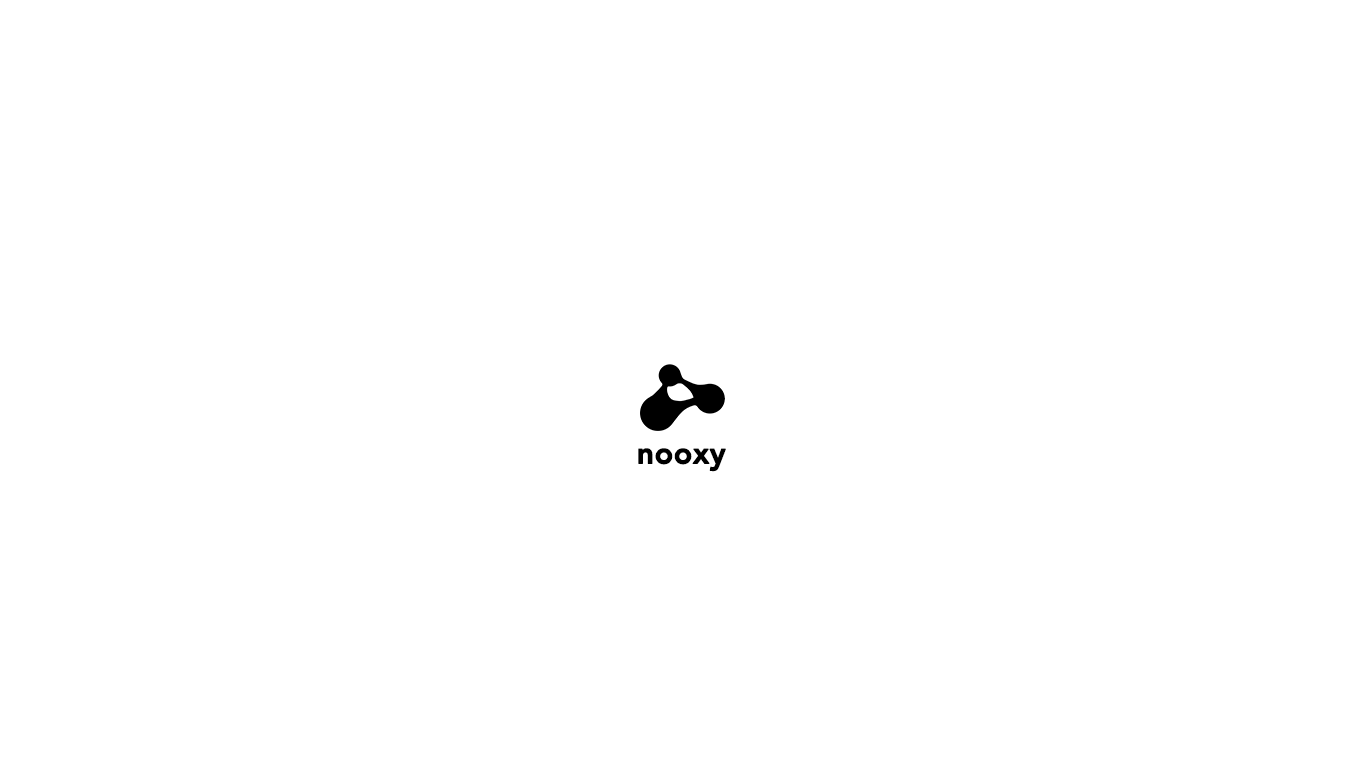
<style>
.page{position:relative;width:1366px;height:768px;background:#ffffff}
.page>*{position:absolute;margin:0}
.t1{font:30px "Avenir-Heavy";color:#000000;font-weight:bold}
</style>
<div class="page">
<p class="t1" style="left:638px;top:448px;width:88px;height:24px">nooxy</p>
</div>
